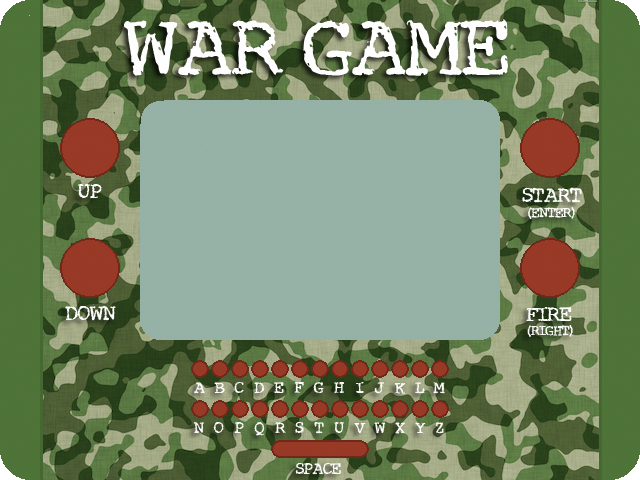
<style>
.page{position:relative;width:640px;height:480px}
.page>*{position:absolute;margin:0}
.t1{font:72px "MiseryLovesCompany";color:#fefefe}
.t2{font:18px "MiseryLovesCompany";color:#fefefe}
.t3{font:18px "MiseryLovesCompany";color:#ffffff}
.t4{font:12px "MiseryLovesCompany";color:#ffffff}
.t5{font:12px "MiseryLovesCompany";color:#fefefe}
.t6{font:14px "MiseryLovesCompany";color:#fefefe}
</style>
<div class="page">
<p class="t1" style="left:124px;top:19px;width:384px;height:57px">WAR  GAME</p>
<p class="t2" style="left:78px;top:184px;width:24px;height:14px">UP</p>
<p class="t3" style="left:522px;top:187px;width:60px;height:16px">START</p>
<p class="t4" style="left:528px;top:207px;width:47px;height:12px">(ENTER)</p>
<p class="t2" style="left:65px;top:305px;width:51px;height:16px">DOWN</p>
<p class="t2" style="left:526px;top:307px;width:46px;height:14px">FIRE</p>
<p class="t5" style="left:527px;top:325px;width:46px;height:12px">(RIGHT)</p>
<p class="t6" style="left:295px;top:463px;width:46px;height:12px">SPACE</p>
</div>
